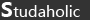
<style>
.page{position:relative;width:90px;height:20px;background:#333333}
.page>*{position:absolute;margin:0}
.t1{font:20px "MicrosoftYaHei-Bold";color:#ffffff}
.t2{font:15px "MicrosoftYaHei";color:#fefefe}
</style>
<div class="page">
<p class="t1" style="left:1px;top:2px;width:11px;height:15px">S</p>
<p class="t2" style="left:13px;top:5px;width:67px;height:12px">tudaholic</p>
</div>
